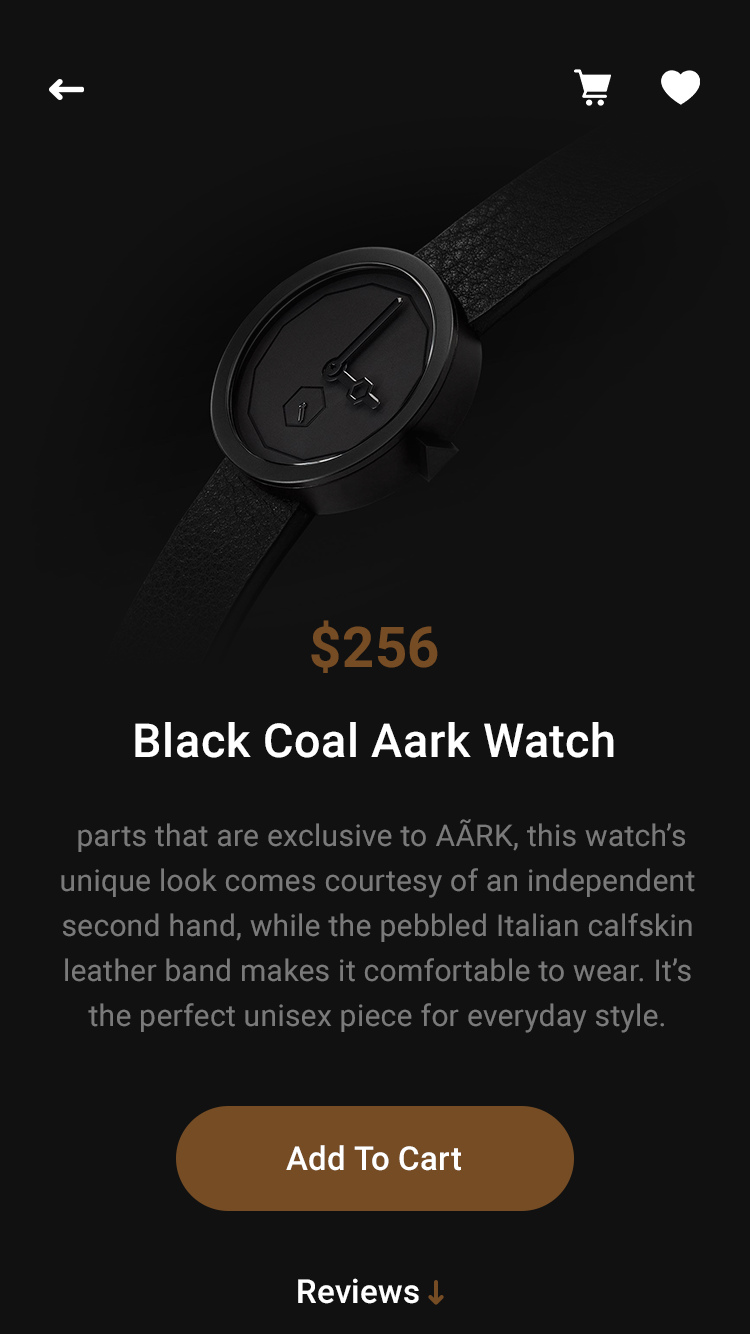
<style>
.page{position:relative;width:750px;height:1334px;background:#111111}
.page>*{position:absolute;margin:0}
.t1{font:56.1px "Roboto-Bold";letter-spacing:0.01em;color:#754c24}
.t2{font:46.8px "Roboto-Medium";letter-spacing:0.01em;color:#ffffff}
.t3{font:30px/45px "Roboto-Regular";letter-spacing:0.01em;color:#7a7a7a}
.t4{font:33px "Roboto-Medium";letter-spacing:0.01em;color:#ffffff}
</style>
<div class="page">
<p class="t1" style="left:311px;top:620px;width:127px;height:53px">$256</p>
<p class="t2" style="left:135px;top:722px;width:479px;height:36px">Black Coal Aark Watch</p>
<p class="t3" style="left:61px;top:819px;width:634px;height:214px;text-align:center">parts that are exclusive to AÃRK, this watch’s unique look comes courtesy of an independent second hand, while the pebbled Italian calfskin leather band makes it comfortable to wear. It’s the perfect unisex piece for everyday style.</p>
<p class="t4" style="left:286px;top:1145px;width:175px;height:26px">Add To Cart</p>
<p class="t4" style="left:298px;top:1278px;width:121px;height:26px">Reviews</p>
</div>
